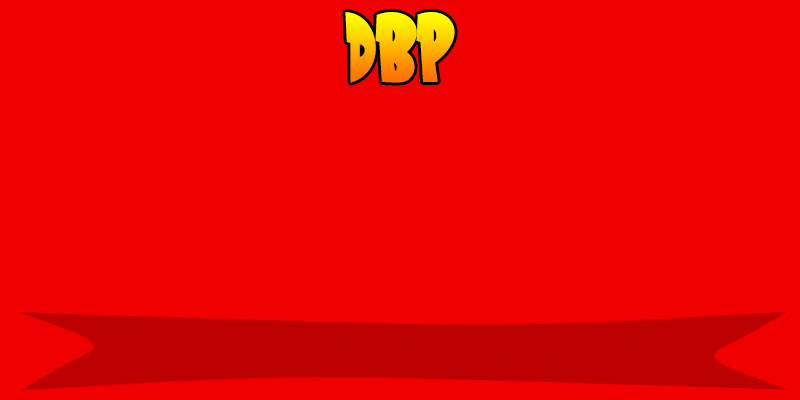
<style>
.page{position:relative;width:800px;height:400px;background:#f10000}
.page>*{position:absolute;margin:0}
.t1{font:100px "SaiyanSans"}
</style>
<div class="page">
<p class="t1" style="left:345px;top:12px;width:110px;height:71px">DBP</p>
</div>
